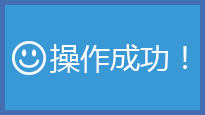
<style>
.page{position:relative;width:205px;height:115px;background:#3998d6}
.page>*{position:absolute;margin:0}
.t1{font:30px "MicrosoftYaHei";color:#ffffff}
</style>
<div class="page">
<p class="t1" style="left:50px;top:44px;width:137px;height:29px">操作成功！</p>
</div>
